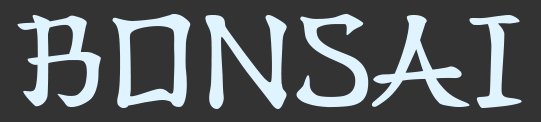
<style>
.page{position:relative;width:541px;height:122px;background:#333333}
.page>*{position:absolute;margin:0}
.t1{font:120.7px "HanZi";color:#e0f4ff}
</style>
<div class="page">
<p class="t1" style="left:17px;top:13px;width:505px;height:96px">BONSAI</p>
</div>
